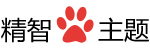
<style>
.page{position:relative;width:150px;height:50px;background:#ffffff}
.page>*{position:absolute;margin:0}
.t1{font:25.5px "MicrosoftYaHei";color:#000000}
</style>
<div class="page">
<p class="t1" style="left:1px;top:17px;width:149px;height:26px">精智      主题</p>
</div>
